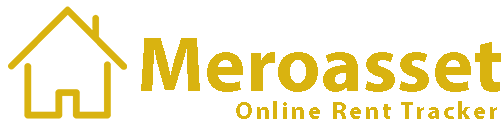
<style>
.page{position:relative;width:502px;height:125px;background:#ffffff}
.page>*{position:absolute;margin:0}
.t1{font:79.3px "MyriadPro-Bold";color:#d9b310}
.t2{font:24.4px "MyriadPro-Bold";letter-spacing:0.12em;color:#d9b310}
</style>
<div class="page">
<p class="t1" style="left:141px;top:38px;width:360px;height:54px">Meroasset</p>
<p class="t2" style="left:236px;top:101px;width:261px;height:18px">Online Rent Tracker</p>
</div>
